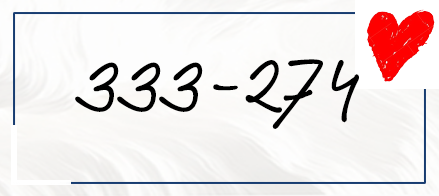
<style>
.page{position:relative;width:439px;height:196px}
.page>*{position:absolute;margin:0}
.t1{font:72px "SignericaMedium";color:#000000;font-weight:bold}
</style>
<div class="page">
<p class="t1" style="left:75px;top:59px;width:284px;height:70px">333-274</p>
</div>
